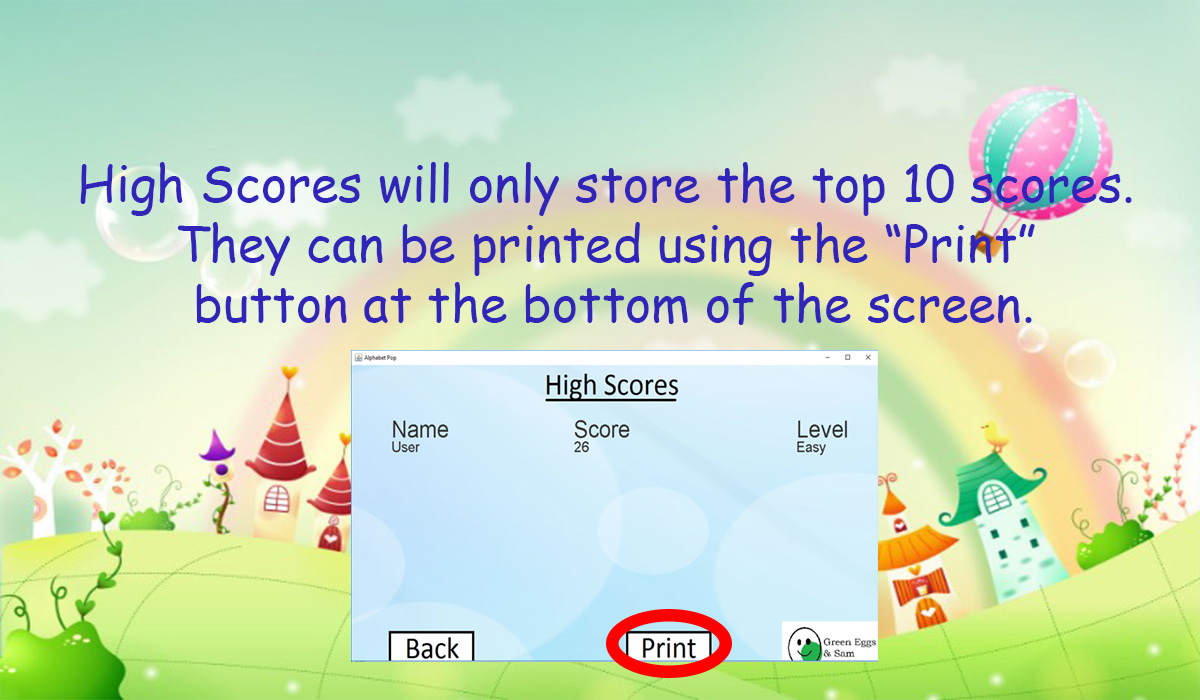
<style>
.page{position:relative;width:1200px;height:700px}
.page>*{position:absolute;margin:0}
.t1{font:12px "ComicSansMS";color:#3124b9}
</style>
<div class="page">
<p class="t1" style="left:80px;top:162px;width:1052px;height:163px;text-align:center">High Scores will only store the top 10 scores. <br>They can be printed using the “Print” <br>button at the bottom of the screen.</p>
</div>
